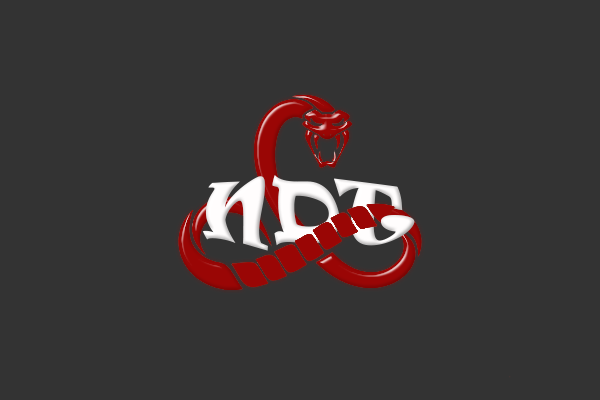
<style>
.page{position:relative;width:600px;height:400px;background:#333333}
.page>*{position:absolute;margin:0}
.t1{font:68.5px "Ravie";color:#fffdfd}
</style>
<div class="page">
<p class="t1" style="left:202px;top:175px;width:213px;height:76px">NDT</p>
</div>
